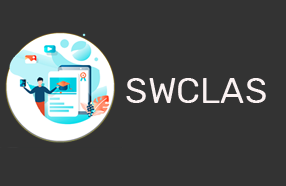
<style>
.page{position:relative;width:286px;height:186px;background:#333333}
.page>*{position:absolute;margin:0}
.t1{font:36px "Rubik-Regular";color:#fbf2f2}
</style>
<div class="page">
<p class="t1" style="left:126px;top:78px;width:140px;height:25px">SWCLAS</p>
</div>
